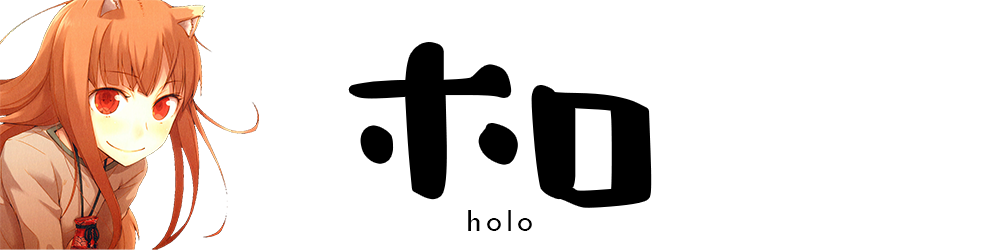
<style>
.page{position:relative;width:1000px;height:250px;background:#ffffff}
.page>*{position:absolute;margin:0}
.t1{font:256px "shirokuma";letter-spacing:0.025em;color:#000000}
.t2{font:32px "TwCenMT-Regular";letter-spacing:0.128em;color:#000000}
</style>
<div class="page">
<p class="t1" style="left:352px;top:46px;width:296px;height:158px">ホロ</p>
<p class="t2" style="left:468px;top:210px;width:64px;height:21px">holo</p>
</div>
